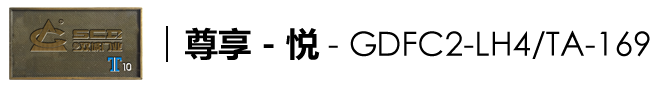
<style>
.page{position:relative;width:660px;height:90px;background:#ffffff}
.page>*{position:absolute;margin:0}
.t1{font:33.3px "STXihei";color:#000000}
.t2{font:33.3px "MicrosoftYaHei-Bold";color:#000000}
</style>
<div class="page">
<p class="t1" style="left:185px;top:27px;width:465px;height:34px"><span class="t2">尊享 - 悦</span> - GDFC2-LH4/TA-169</p>
</div>
